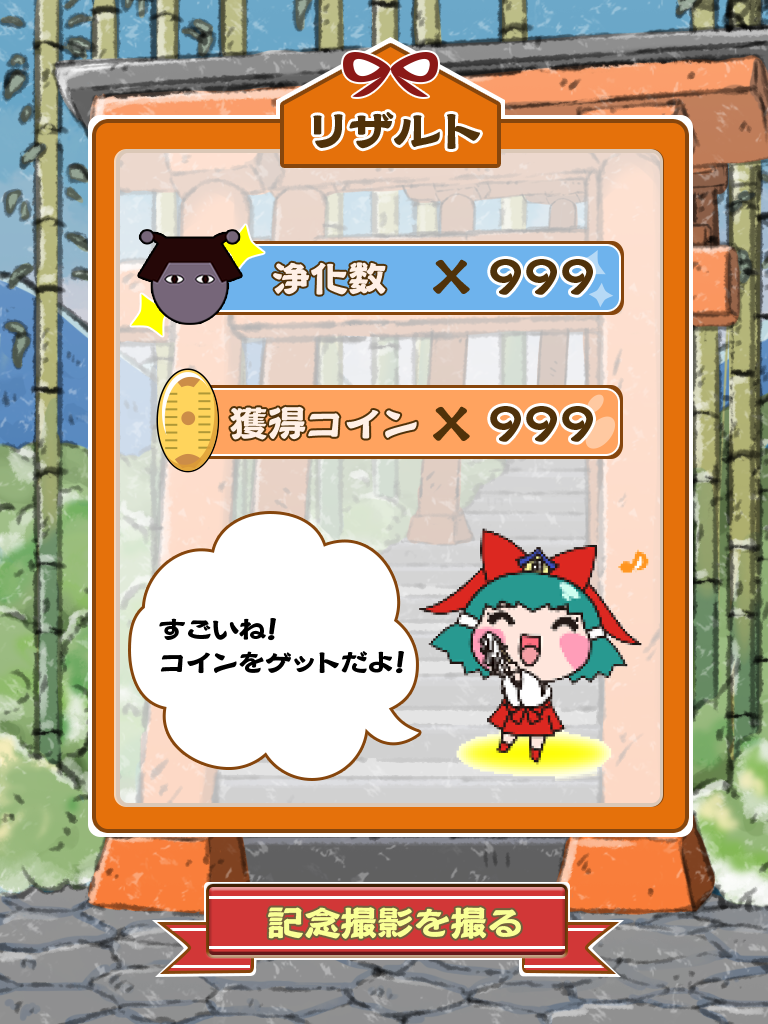
<style>
.page{position:relative;width:768px;height:1024px}
.page>*{position:absolute;margin:0}
.t1{font:46.3px "HoureiStd-EB";color:#50320a}
.t2{font:38.2px "HoureiStd-EB";color:#fff0e6}
.t3{font:47.1px "HoureiStd-EB";color:#50320a}
.t4{font:27px "HoureiStd-EB";color:#000000}
.t5{font:36.7px "HoureiStd-EB";color:#f9ff96}
</style>
<div class="page">
<p class="t1" style="left:313px;top:112px;width:167px;height:37px">リザルト</p>
<p class="t2" style="left:273px;top:262px;width:113px;height:33px">浄化数</p>
<p class="t3" style="left:433px;top:259px;width:37px;height:35px">X</p>
<p class="t3" style="left:490px;top:259px;width:103px;height:36px">999</p>
<p class="t2" style="left:230px;top:406px;width:187px;height:34px">獲得コイン</p>
<p class="t3" style="left:433px;top:406px;width:37px;height:35px">X</p>
<p class="t3" style="left:490px;top:406px;width:103px;height:36px">999</p>
<p class="t4" style="left:159px;top:618px;width:245px;height:56px">すごいね！<br>コインをゲットだよ！</p>
<p class="t5" style="left:268px;top:907px;width:253px;height:32px">記念撮影を撮る</p>
</div>
